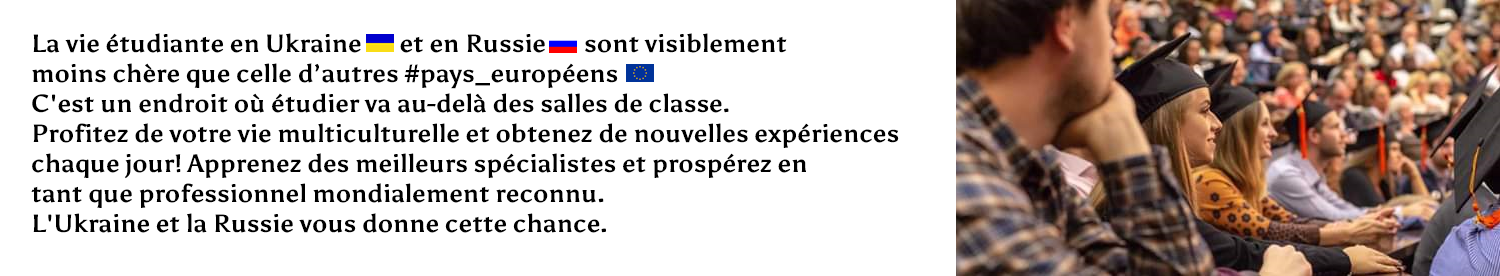
<style>
.page{position:relative;width:1500px;height:276px;background:#ffffff}
.page>*{position:absolute;margin:0}
.t1{font:25px "Asul-Bold";color:#000000}
</style>
<div class="page">
<p class="t1" style="left:31px;top:33px;width:868px;height:200px">La vie étudiante en Ukraine       et en Russie       sont visiblement <br>moins chère que celle d’autres #pays_européens <br>C'est un endroit où étudier va au-delà des salles de classe.<br>Profitez de votre vie multiculturelle et obtenez de nouvelles expériences <br>chaque jour! Apprenez des meilleurs spécialistes et prospérez en <br>tant que professionnel mondialement reconnu. <br>L'Ukraine et la Russie vous donne cette chance.</p>
</div>
